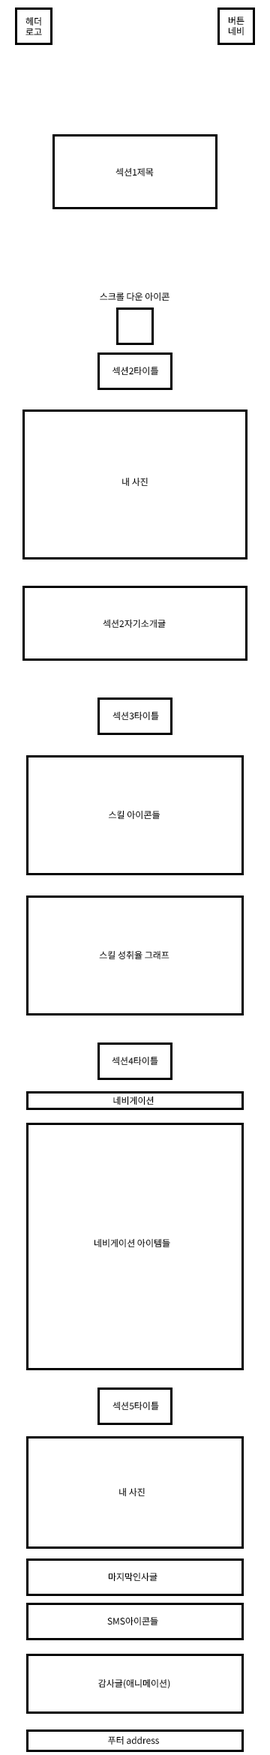
<style>
.page{position:relative;width:270px;height:1755px;background:#ffffff}
.page>*{position:absolute;margin:0}
.t1{font:9px "NotoSansKR-Regular";color:#000000}
</style>
<div class="page">
<p class="t1" style="left:26px;top:16px;width:16px;height:19px;text-align:center">헤더<br>로고</p>
<p class="t1" style="left:228px;top:16px;width:16px;height:20px;text-align:center">버튼<br>네비</p>
<p class="t1" style="left:116px;top:167px;width:38px;height:10px">섹션1제목</p>
<p class="t1" style="left:100px;top:292px;width:70px;height:10px">스크롤 다운 아이콘</p>
<p class="t1" style="left:112px;top:366px;width:47px;height:10px">섹션2타이틀</p>
<p class="t1" style="left:122px;top:477px;width:26px;height:10px">내 사진</p>
<p class="t1" style="left:103px;top:619px;width:63px;height:9px">섹션2자기소개글</p>
<p class="t1" style="left:112px;top:711px;width:47px;height:10px">섹션3타이틀</p>
<p class="t1" style="left:108px;top:810px;width:52px;height:10px">스킬 아이콘들</p>
<p class="t1" style="left:99px;top:950px;width:71px;height:10px">스킬 성취율 그래프</p>
<p class="t1" style="left:112px;top:1056px;width:46px;height:10px">섹션4타이틀</p>
<p class="t1" style="left:113px;top:1096px;width:41px;height:10px">네비게이션</p>
<p class="t1" style="left:94px;top:1238px;width:76px;height:10px">네비게이션 아이템들</p>
<p class="t1" style="left:112px;top:1401px;width:47px;height:10px">섹션5타이틀</p>
<p class="t1" style="left:119px;top:1487px;width:26px;height:10px">내 사진</p>
<p class="t1" style="left:108px;top:1572px;width:50px;height:10px">마지막인사글</p>
<p class="t1" style="left:107px;top:1616px;width:51px;height:10px">SMS아이콘들</p>
<p class="t1" style="left:98px;top:1678px;width:72px;height:11px">감사글(애니메이션)</p>
<p class="t1" style="left:107px;top:1736px;width:53px;height:9px">푸터 address</p>
</div>
